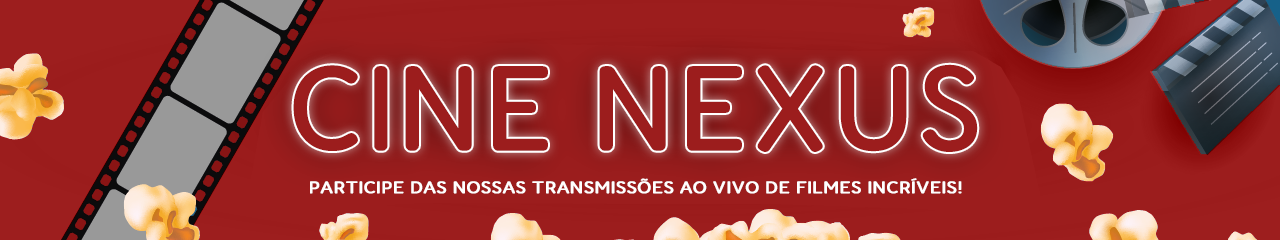
<style>
.page{position:relative;width:1280px;height:240px;background:#9c1d1d}
.page>*{position:absolute;margin:0}
.t1{font:17px "FredokaSemiCondensed-Regular";color:#ffffff;font-weight:bold;scale:1.28 1}
</style>
<div class="page">
<p class="t1" style="left:310px;top:178px;width:652px;height:16px">PARTICIPE DAS NOSSAS TRANSMISSÕES AO VIVO DE FILMES INCRÍVEIS!</p>
</div>
